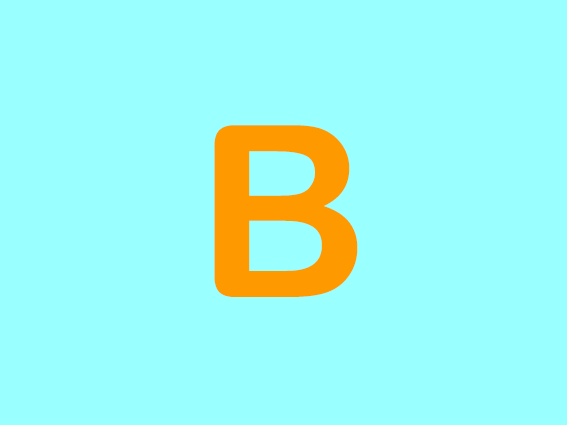
<style>
.page{position:relative;width:567px;height:425px;background:#99ffff}
.page>*{position:absolute;margin:0}
.t1{font:240px "ArialRoundedMTBold";color:#ff9900}
</style>
<div class="page">
<p class="t1" style="left:214px;top:125px;width:144px;height:172px">B</p>
</div>
